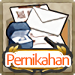
<style>
.page{position:relative;width:75px;height:75px}
.page>*{position:absolute;margin:0}
.t1{font:16px "AdobeClean-Regular";letter-spacing:-0.08em;color:#ff5a00}
</style>
<div class="page">
<p class="t1" style="left:7px;top:53px;width:63px;height:13px">Pernikahan</p>
</div>
